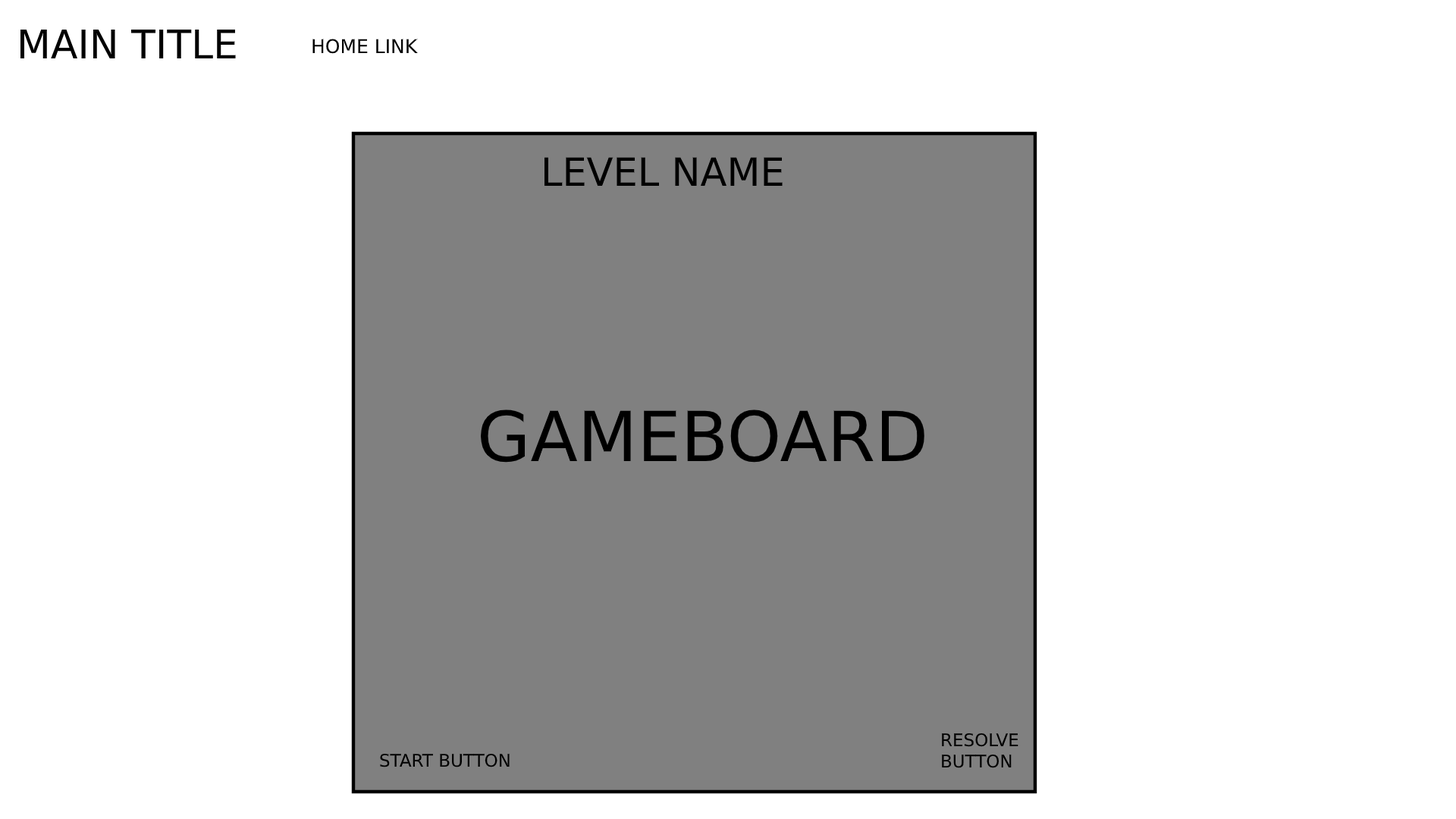
<style>
.page{position:relative;width:1456px;height:819px;background:#ffffff}
.page>*{position:absolute;margin:0}
.t1{font:39.4px "DejaVuSans";color:#000000}
.t2{font:19px "DejaVuSans";color:#000000}
.t3{font:38.7px "DejaVuSans";color:#000000}
.t4{font:69px "DejaVuSans";color:#000000}
.t5{font:17.4px "DejaVuSans";color:#000000}
</style>
<div class="page">
<p class="t1" style="left:20px;top:30px;width:216px;height:28px">MAIN TITLE</p>
<p class="t2" style="left:312px;top:39px;width:106px;height:15px">HOME LINK</p>
<p class="t3" style="left:544px;top:157px;width:239px;height:29px">LEVEL NAME</p>
<p class="t4" style="left:481px;top:409px;width:443px;height:54px">GAMEBOARD</p>
<p class="t5" style="left:942px;top:733px;width:76px;height:35px">RESOLVE<br>BUTTON</p>
<p class="t5" style="left:380px;top:753px;width:130px;height:14px">START BUTTON</p>
</div>
